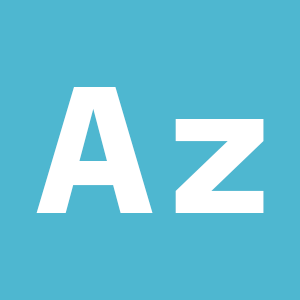
<style>
.page{position:relative;width:300px;height:300px;background:#4eb7d0}
.page>*{position:absolute;margin:0}
.t1{font:172px "InputSans-Black";color:#ffffff}
</style>
<div class="page">
<p class="t1" style="left:36px;top:87px;width:228px;height:126px">Az</p>
</div>
